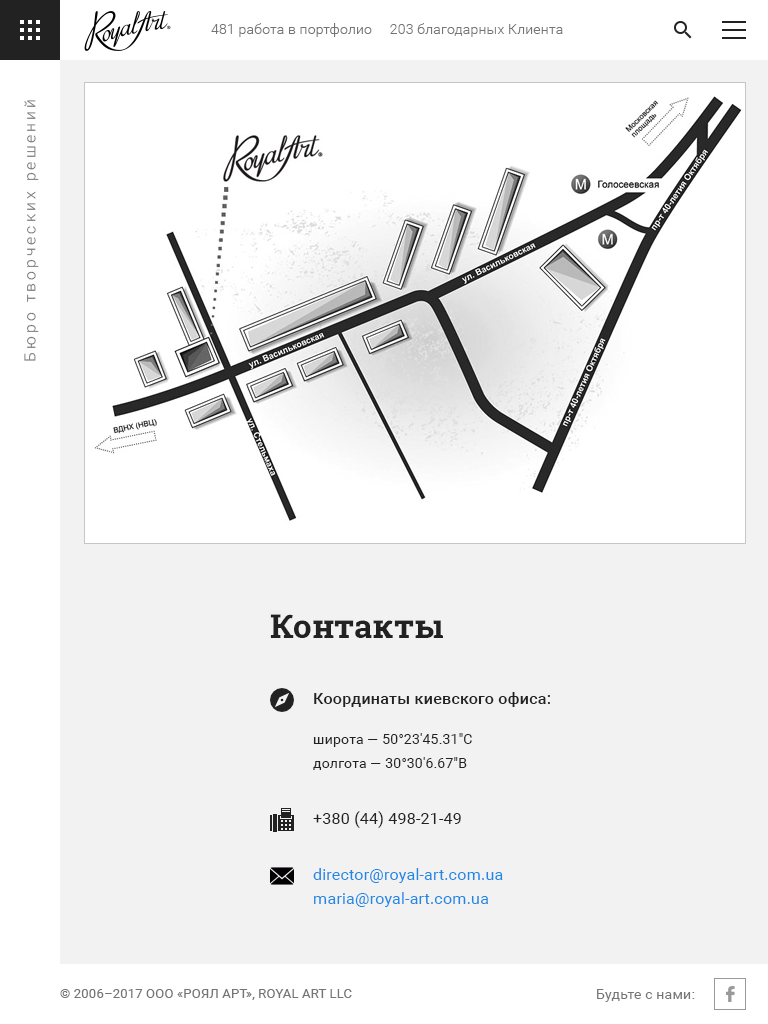
<style>
.page{position:relative;width:768px;height:1024px;background:#ffffff}
.page>*{position:absolute;margin:0}
.t1{font:14px "Roboto-Light";color:#757575;scale:1.03 1}
.t2{font:15px "Roboto-Light";letter-spacing:0.2em;color:#757575;scale:1.05 1}
.t3{font:32px "RobotoSlab-Bold";color:#222222;scale:1.03 1}
.t4{font:16px "Roboto-Medium";color:#222222;scale:1.03 1}
.t5{font:14px/24px "Roboto-Regular";color:#222222;scale:1.03 1}
.t6{font:16px "Roboto-Regular";color:#222222;scale:1.03 1}
.t7{font:16px/24px "Roboto-Regular";color:#1e88e5;scale:1.03 1}
.t8{font:13px "Roboto-Regular";color:#757575;scale:1.03 1}
.t9{font:14px "Roboto-Regular";color:#757575;scale:1.03 1}
</style>
<div class="page">
<p class="t1" style="left:211px;top:23px;width:352px;height:14px">481 работа в портфолио     203 благодарных Клиента</p>
<p class="t2" style="left:24px;top:100px;width:15px;height:261px;rotate:-90deg">Бюро творческих решений</p>
<p class="t3" style="left:270px;top:614px;width:173px;height:24px">Контакты</p>
<p class="t4" style="left:314px;top:692px;width:236px;height:15px">Координаты киевского офиса:</p>
<p class="t5" style="left:313px;top:733px;width:159px;height:37px">широта — 50°23'45.31"С<br>долгота — 30°30'6.67"В</p>
<p class="t6" style="left:313px;top:811px;width:148px;height:17px">+380 (44) 498-21-49</p>
<p class="t7" style="left:313px;top:868px;width:190px;height:39px">director@royal-art.com.ua<br>maria@royal-art.com.ua</p>
<p class="t8" style="left:60px;top:989px;width:292px;height:11px">© 2006–2017 ООО «РОЯЛ АРТ», ROYAL ART LLC</p>
<p class="t9" style="left:597px;top:989px;width:98px;height:13px">Будьте с нами:</p>
</div>
